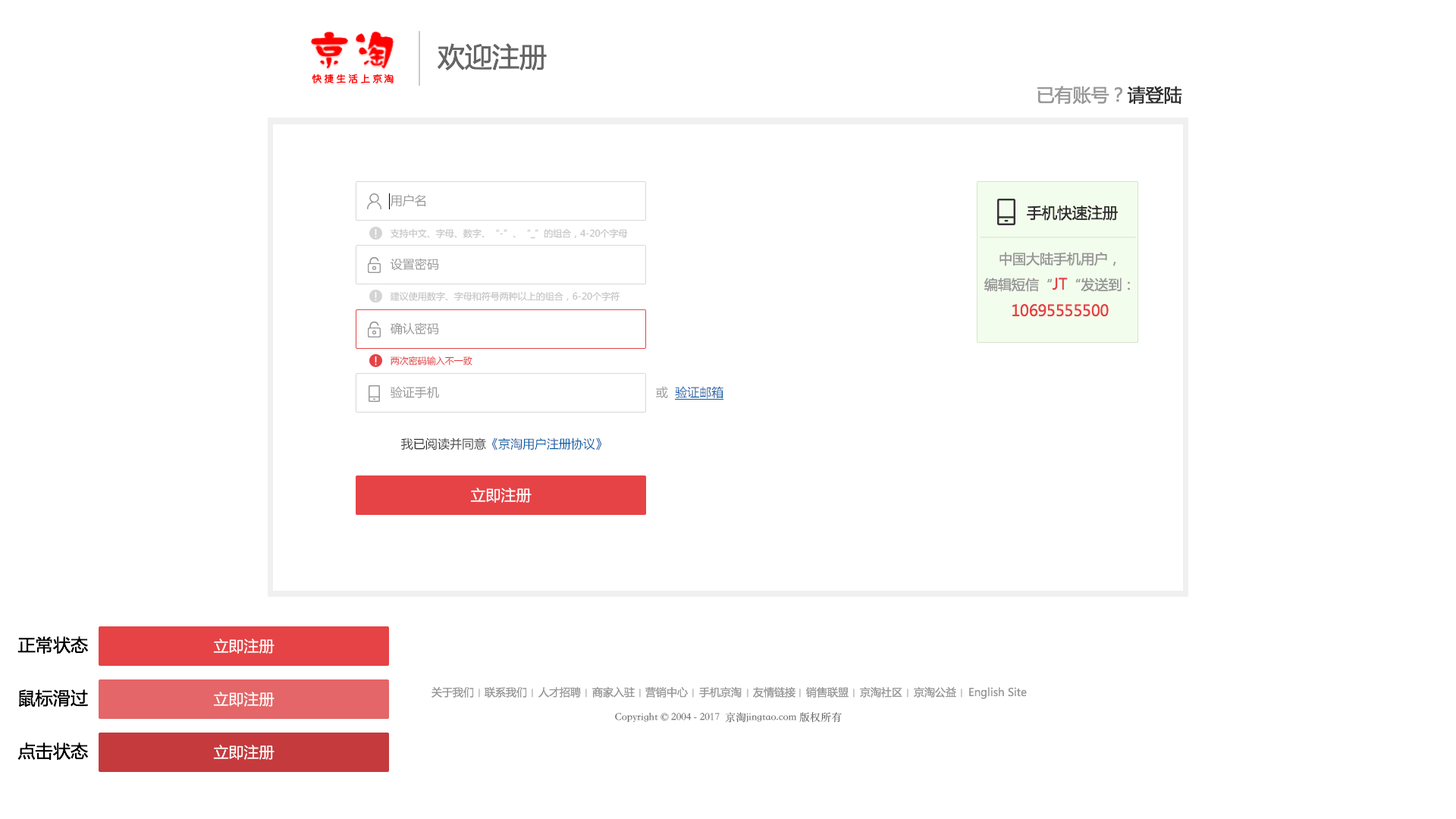
<style>
.page{position:relative;width:1456px;height:819px;background:#ffffff}
.page>*{position:absolute;margin:0}
.t1{font:27.3px "MicrosoftYaHei";color:#666666}
.t2{font:10.1px "YuppySC-Regular";letter-spacing:0.18em;color:#ff0000}
.t3{font:18.2px "MicrosoftYaHei";color:#999999}
.t4{font:18.2px "MicrosoftYaHei";color:#333333}
.t5{font:12.1px "MicrosoftYaHei";color:#999999}
.t6{font:15.2px "MicrosoftYaHei";color:#333333}
.t7{font:9.1px "MicrosoftYaHei";color:#c3c2c2}
.t8{font:13.6px "MicrosoftYaHei";color:#999999}
.t9{font:15.2px "MicrosoftYaHei";color:#e64346}
.t10{font:9.1px "MicrosoftYaHei";color:#c3c3c3}
.t11{font:9.1px "MicrosoftYaHei";color:#e64346}
.t12{font:12.1px "MicrosoftYaHei";color:#005ea7}
.t13{font:12.1px "MicrosoftYaHei";color:#333333}
.t14{font:15.2px "MicrosoftYaHei";color:#ffffff}
.t15{font:17.5px "MicrosoftYaHei";color:#000000}
.t16{font:10.6px "MicrosoftYaHei";color:#999999}
.t17{font:10.6px "STSongti-SC-Regular";color:#666666}
</style>
<div class="page">
<p class="t1" style="left:438px;top:43px;width:109px;height:28px">欢迎注册</p>
<p class="t2" style="left:312px;top:74px;width:82px;height:9px">快捷生活上京淘</p>
<p class="t3" style="left:1037px;top:86px;width:145px;height:19px">已有账号？<span class="t4">请登陆</span></p>
<p class="t5" style="left:391px;top:194px;width:35px;height:13px">用户名</p>
<p class="t6" style="left:1027px;top:205px;width:91px;height:16px">手机快速注册</p>
<p class="t7" style="left:390px;top:228px;width:238px;height:11px">支持中文、字母、数字、“-”、“_”的组合，4-20个字母</p>
<p class="t5" style="left:390px;top:258px;width:49px;height:13px">设置密码</p>
<p class="t8" style="left:984px;top:252px;width:146px;height:65px;text-align:center">中国大陆手机用户，<br>编辑短信“<span class="t9">JT</span>“发送到：<br><span class="t9">10695555500</span></p>
<p class="t10" style="left:390px;top:291px;width:230px;height:10px">建议使用数字、字母和符号两种以上的组合，6-20个字符</p>
<p class="t5" style="left:391px;top:322px;width:48px;height:13px">确认密码</p>
<p class="t11" style="left:390px;top:356px;width:82px;height:10px">两次密码输入不一致</p>
<p class="t5" style="left:391px;top:386px;width:48px;height:13px">验证手机</p>
<p class="t12" style="left:656px;top:386px;width:67px;height:13px"><span class="t5">或  </span>验证邮箱</p>
<p class="t12" style="left:401px;top:438px;width:201px;height:12px"><span class="t13">我已阅读并同意</span>《京淘用户注册协议》</p>
<p class="t14" style="left:470px;top:488px;width:62px;height:15px">立即注册</p>
<p class="t15" style="left:17px;top:636px;width:72px;height:18px">正常状态</p>
<p class="t14" style="left:213px;top:639px;width:62px;height:15px">立即注册</p>
<p class="t15" style="left:18px;top:689px;width:70px;height:19px">鼠标滑过</p>
<p class="t16" style="left:431px;top:687px;width:43px;height:11px">关于我们</p>
<p class="t16" style="left:485px;top:687px;width:42px;height:11px">联系我们</p>
<p class="t16" style="left:538px;top:687px;width:43px;height:11px">人才招聘</p>
<p class="t16" style="left:592px;top:686px;width:43px;height:12px">商家入驻</p>
<p class="t16" style="left:645px;top:686px;width:43px;height:12px">营销中心</p>
<p class="t16" style="left:699px;top:687px;width:43px;height:11px">手机京淘</p>
<p class="t16" style="left:753px;top:686px;width:42px;height:12px">友情链接</p>
<p class="t16" style="left:806px;top:686px;width:43px;height:12px">销售联盟</p>
<p class="t16" style="left:860px;top:687px;width:42px;height:11px">京淘社区</p>
<p class="t16" style="left:914px;top:687px;width:42px;height:11px">京淘公益</p>
<p class="t16" style="left:969px;top:687px;width:58px;height:12px">English Site</p>
<p class="t14" style="left:213px;top:692px;width:62px;height:15px">立即注册</p>
<p class="t17" style="left:615px;top:712px;width:227px;height:11px">Copyright © 2004 - 2017  京淘jingtao.com 版权所有</p>
<p class="t15" style="left:17px;top:742px;width:72px;height:18px">点击状态</p>
<p class="t14" style="left:213px;top:745px;width:62px;height:15px">立即注册</p>
</div>
